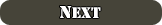
<style>
.page{position:relative;width:162px;height:25px;background:#464439}
.page>*{position:absolute;margin:0}
.t1{font:16px "Stencil";letter-spacing:0.01em;color:#ffffff}
.t2{font:18px "Stencil";letter-spacing:0.01em;color:#ffffff}
</style>
<div class="page">
<p class="t1" style="left:60px;top:6px;width:41px;height:12px"><span class="t2">N</span>ext</p>
</div>
